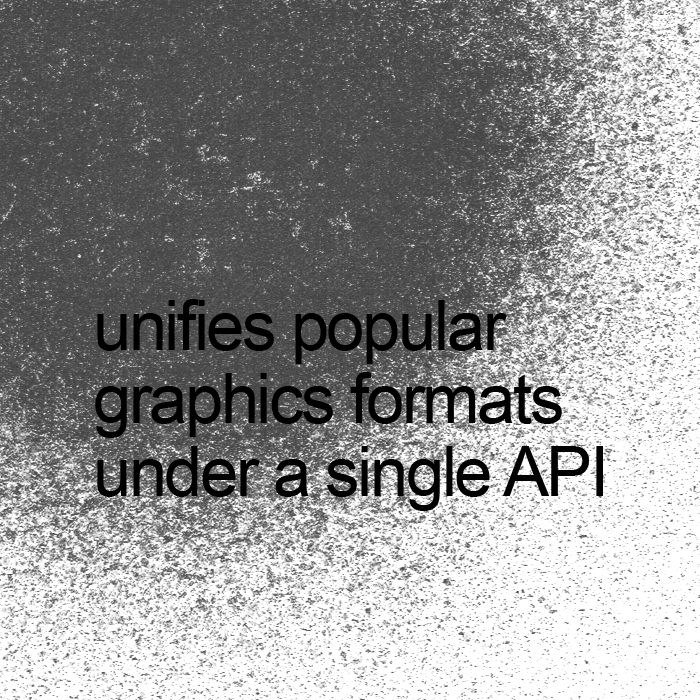
<style>
.page{position:relative;width:700px;height:700px}
.page>*{position:absolute;margin:0}
.t1{font:69.5px/73px "ArialMT";letter-spacing:-0.04em;color:#000000}
</style>
<div class="page">
<p class="t1" style="left:95px;top:299px;width:508px;height:212px">unifies popular<br>graphics formats<br>under a single API</p>
</div>
